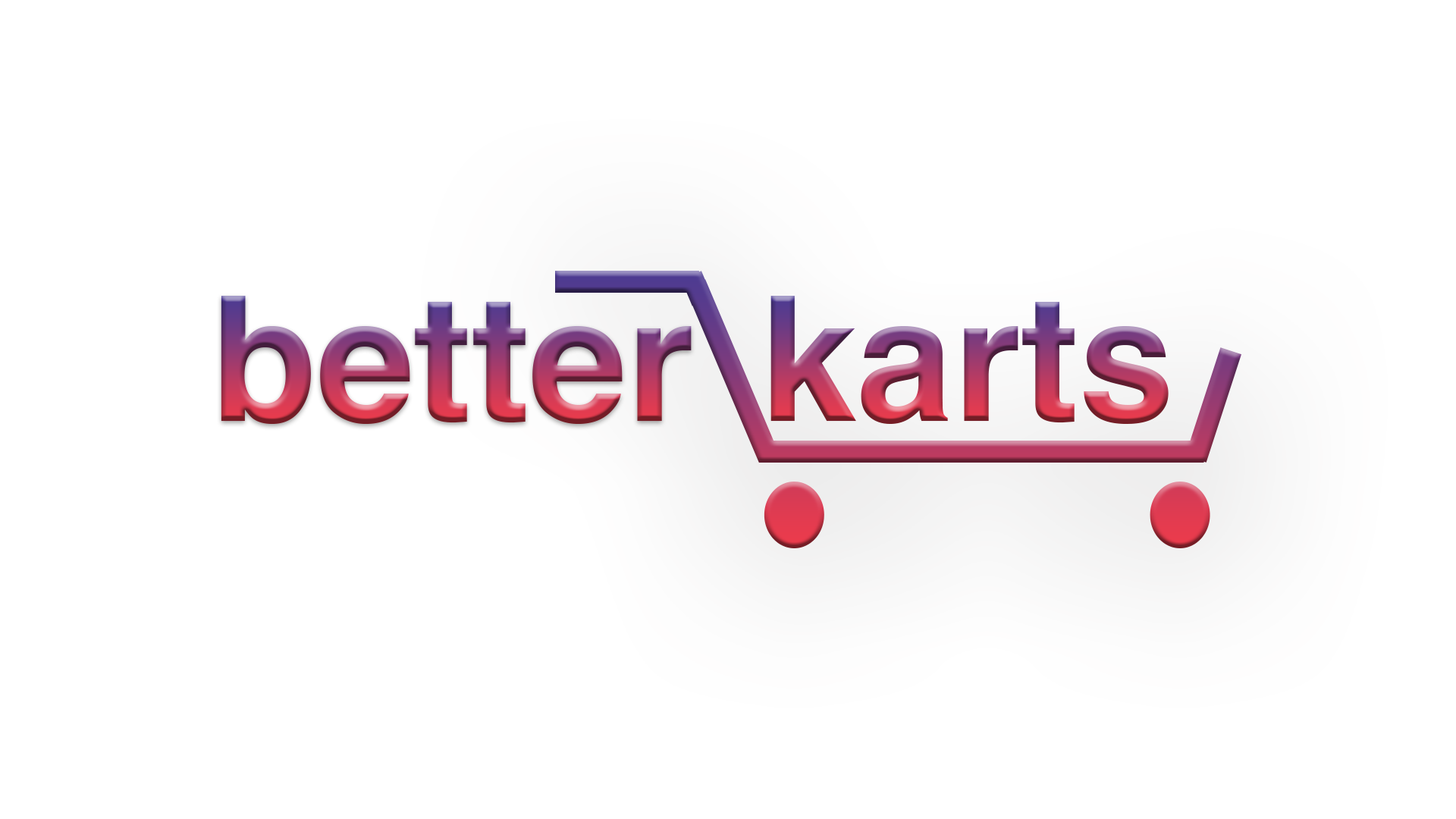
<style>
.page{position:relative;width:1456px;height:819px;background:#ffffff}
.page>*{position:absolute;margin:0}
.t1{font:173.8px "Helvetica-Bold"}
</style>
<div class="page">
<p class="t1" style="left:221px;top:296px;width:471px;height:128px">better</p>
<p class="t1" style="left:770px;top:296px;width:399px;height:128px">karts</p>
</div>
